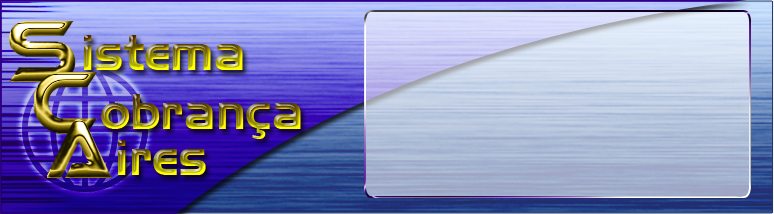
<style>
.page{position:relative;width:774px;height:214px}
.page>*{position:absolute;margin:0}
.t1{font:47.9px "AeroRegularSWFTE";scale:1.04 1}
</style>
<div class="page">
<p class="t1" style="left:84px;top:35px;width:159px;height:35px">istema</p>
<p class="t1" style="left:101px;top:94px;width:200px;height:45px">obrança</p>
<p class="t1" style="left:118px;top:140px;width:88px;height:35px">ires</p>
</div>
